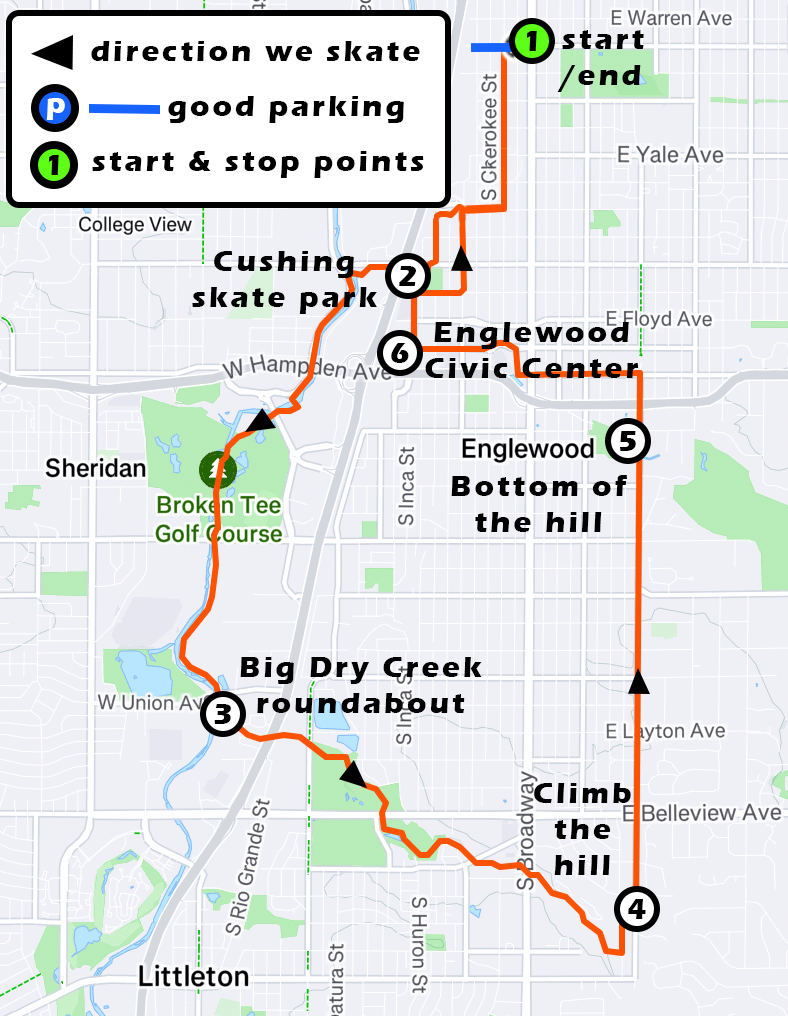
<style>
.page{position:relative;width:788px;height:1016px;background:#efeff6}
.page>*{position:absolute;margin:0}
.t1{font:30px "ErasITC-Bold";letter-spacing:0.1em;color:#000000}
.t2{font:30px "ErasITC-Bold";letter-spacing:0.1em;color:#ffffff}
</style>
<div class="page">
<p class="t1" style="left:557px;top:30px;width:87px;height:62px">start<br>/end</p>
<p class="t1" style="left:91px;top:41px;width:329px;height:20px">direction we skate</p>
<p class="t1" style="left:526px;top:31px;width:11px;height:20px">1</p>
<p class="t2" style="left:46px;top:98px;width:19px;height:22px">p</p>
<p class="t1" style="left:168px;top:96px;width:236px;height:27px">good parking</p>
<p class="t1" style="left:48px;top:155px;width:11px;height:20px">1</p>
<p class="t1" style="left:92px;top:151px;width:332px;height:27px">start &amp; stop points</p>
<p class="t1" style="left:192px;top:251px;width:185px;height:63px;text-align:center">Cushing<br>skate park</p>
<p class="t1" style="left:399px;top:266px;width:17px;height:20px">2</p>
<p class="t1" style="left:425px;top:322px;width:214px;height:56px;text-align:center">Englewood<br>Civic Center</p>
<p class="t1" style="left:391px;top:343px;width:18px;height:20px">6</p>
<p class="t1" style="left:620px;top:431px;width:16px;height:20px">5</p>
<p class="t1" style="left:451px;top:475px;width:176px;height:57px;text-align:center">Bottom of<br>the hill</p>
<p class="t1" style="left:240px;top:657px;width:242px;height:56px;text-align:center">Big Dry Creek<br>roundabout</p>
<p class="t1" style="left:214px;top:704px;width:17px;height:20px">3</p>
<p class="t1" style="left:534px;top:783px;width:97px;height:92px;text-align:center">Climb<br>the<br>hill</p>
<p class="t1" style="left:628px;top:899px;width:18px;height:20px">4</p>
</div>
